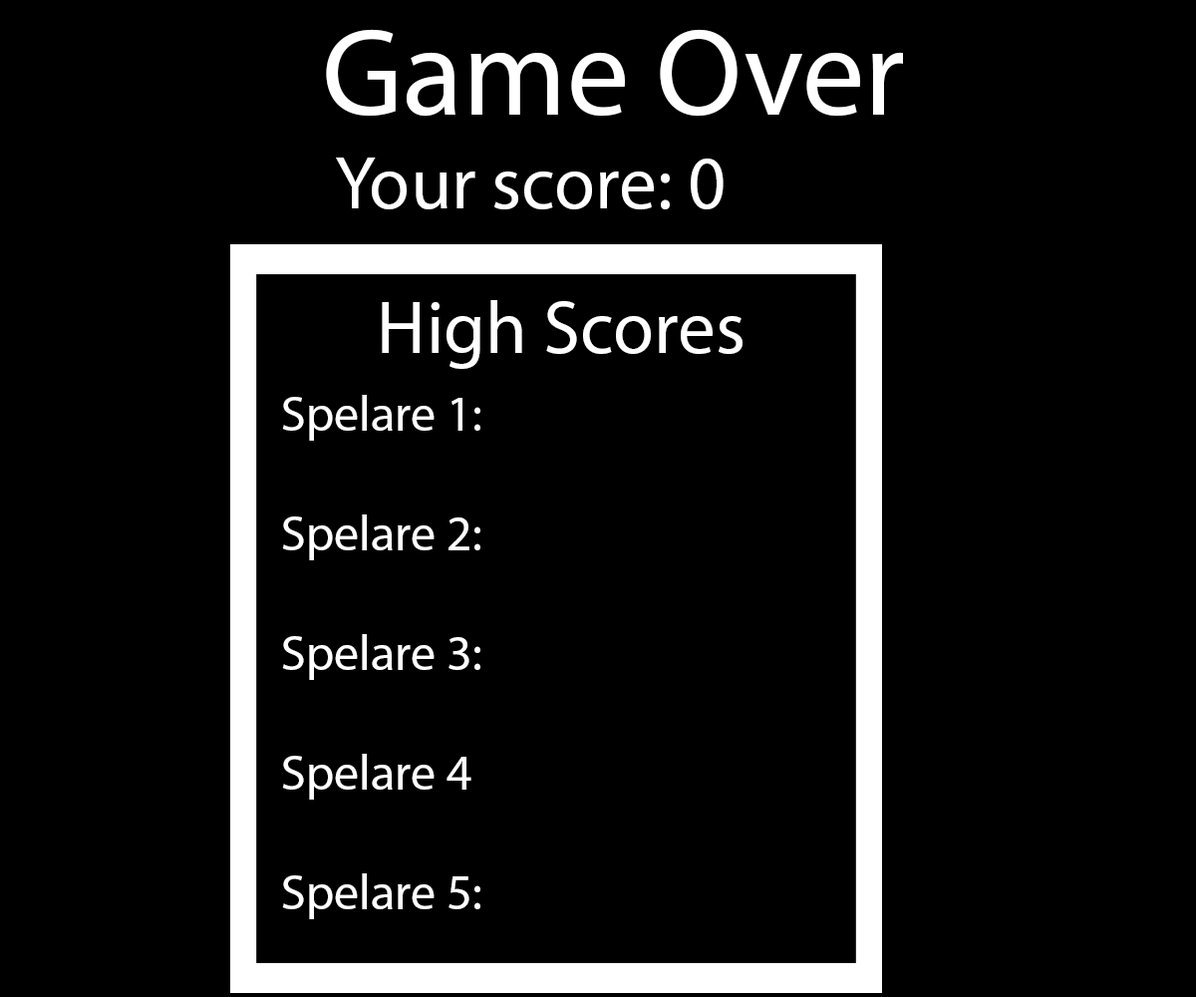
<style>
.page{position:relative;width:1196px;height:997px;background:#000000}
.page>*{position:absolute;margin:0}
.t1{font:124.6px "MyriadPro-Regular";color:#ffffff}
.t2{font:74.8px "MyriadPro-Regular";color:#ffffff}
.t3{font:49.8px "MyriadPro-Regular";color:#ffffff}
</style>
<div class="page">
<p class="t1" style="left:326px;top:29px;width:577px;height:88px">Game Over</p>
<p class="t2" style="left:336px;top:158px;width:388px;height:51px">Your score: 0</p>
<p class="t2" style="left:382px;top:300px;width:361px;height:69px">High Scores</p>
<p class="t3" style="left:282px;top:395px;width:198px;height:524px">Spelare 1:<br><br>Spelare 2:<br><br>Spelare 3:<br><br>Spelare 4<br><br>Spelare 5:</p>
</div>
